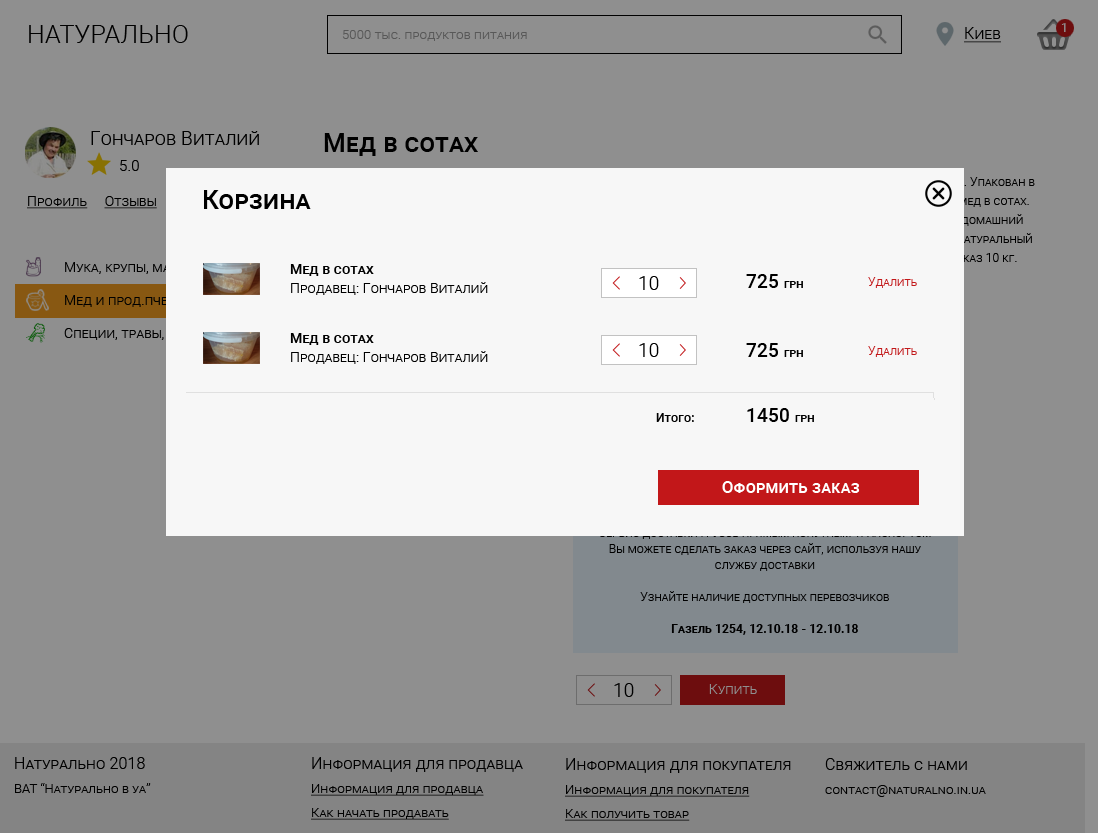
<style>
.page{position:relative;width:1098px;height:833px;background:#8f8f8f}
.page>*{position:absolute;margin:0}
.t1{font:25px "Roboto-Light";letter-spacing:0.01em;color:#000000;font-variant:small-caps}
.t2{font:13px "Roboto-Light";letter-spacing:0.01em;color:#585858;font-variant:small-caps}
.t3{font:16px "Roboto-Light";letter-spacing:0.01em;color:#000000;font-variant:small-caps;text-decoration:underline}
.t4{font:12px "Roboto-Medium";letter-spacing:0.01em;font-variant:small-caps}
.t5{font:19px "Roboto-Light";letter-spacing:0.01em;color:#000000;font-variant:small-caps}
.t6{font:26px "Roboto-Medium";letter-spacing:0.01em;color:#000000;font-variant:small-caps}
.t7{font:15px "Roboto-Light";letter-spacing:0.01em;color:#000000;font-variant:small-caps}
.t8{font:14px "Roboto-Light";letter-spacing:0.01em;color:#000000;font-variant:small-caps;text-decoration:underline}
.t9{font:14px/19px "Roboto-Light";letter-spacing:0.01em;color:#000000;font-variant:small-caps}
.t10{font:14px/19px "Roboto-Medium";letter-spacing:0.01em;color:#000000;font-variant:small-caps}
.t11{font:19px "Roboto-Medium";letter-spacing:0.01em;color:#000000;font-variant:small-caps}
.t12{font:12px "Roboto-Medium";letter-spacing:0.01em;color:#000000;font-variant:small-caps}
.t13{font:12px "Roboto-Light";letter-spacing:0.01em;color:#c21719;font-variant:small-caps}
.t14{font:17px "Roboto-Medium";letter-spacing:0.01em;color:#ffffff;font-variant:small-caps}
.t15{font:12px/16px "Roboto-Light";letter-spacing:0.01em;color:#000000;font-variant:small-caps}
.t16{font:12px/16px "Roboto-Bold";letter-spacing:0.01em;color:#000000;font-variant:small-caps}
.t17{font:14px "Roboto-Light";letter-spacing:0.01em;color:#8f8f8f;font-variant:small-caps}
.t18{font:13px/24px "Roboto-Light";letter-spacing:0.01em;color:#000000;font-variant:small-caps}
.t19{font:16px/26px "Roboto-Light";letter-spacing:0.01em;color:#000000;font-variant:small-caps}
.t20{font:13px/24px "Roboto-Light";letter-spacing:0.01em;color:#000000;font-variant:small-caps;text-decoration:underline}
</style>
<div class="page">
<p class="t1" style="left:29px;top:25px;width:159px;height:18px">НАТУРАЛЬНО</p>
<p class="t2" style="left:342px;top:30px;width:185px;height:11px">5000 тыс. продуктов питания</p>
<p class="t3" style="left:964px;top:27px;width:37px;height:16px">Киев</p>
<p class="t4" style="left:1061px;top:23px;width:5px;height:9px">1</p>
<p class="t5" style="left:91px;top:131px;width:168px;height:14px">Гончаров Виталий</p>
<p class="t6" style="left:324px;top:133px;width:154px;height:23px">Мед в сотах</p>
<p class="t7" style="left:120px;top:160px;width:19px;height:11px">5.0</p>
<p class="t8" style="left:27px;top:196px;width:130px;height:13px">Профиль     Отзывы</p>
<p class="t6" style="left:204px;top:190px;width:107px;height:19px">Корзина</p>
<p class="t9" style="left:290px;top:264px;width:198px;height:31px"><span class="t10">Мед в сотах<br></span>Продавец: Гончаров Виталий</p>
<p class="t5" style="left:639px;top:276px;width:20px;height:14px">10</p>
<p class="t11" style="left:746px;top:274px;width:57px;height:14px">725 <span class="t12">грн</span></p>
<p class="t13" style="left:868px;top:277px;width:49px;height:11px">Удалить</p>
<p class="t9" style="left:290px;top:333px;width:198px;height:31px"><span class="t10">Мед в сотах<br></span>Продавец: Гончаров Виталий</p>
<p class="t5" style="left:639px;top:343px;width:20px;height:14px">10</p>
<p class="t11" style="left:746px;top:343px;width:57px;height:14px">725 <span class="t12">грн</span></p>
<p class="t13" style="left:868px;top:346px;width:49px;height:11px">Удалить</p>
<p class="t12" style="left:656px;top:413px;width:38px;height:9px">Итого:</p>
<p class="t11" style="left:747px;top:408px;width:67px;height:14px">1450 <span class="t12">грн</span></p>
<p class="t14" style="left:722px;top:481px;width:138px;height:12px">Оформить заказ</p>
<p class="t15" style="left:599px;top:528px;width:332px;height:107px;text-align:center">Сервис доставки грузов прямым попутным транспортом<br>Вы можете сделать заказ через сайт, используя нашу службу доставки<br><br>Узнайте наличие доступных перевозчиков<br><br><span class="t16">Газель 1254, 12.10.18 - 12.10.18</span></p>
<p class="t5" style="left:614px;top:683px;width:20px;height:14px">10</p>
<p class="t17" style="left:709px;top:684px;width:48px;height:10px">Купить</p>
<p class="t18" style="left:15px;top:757px;width:136px;height:36px"><span class="t19">Натурально 2018<br></span>ВАТ “Натурально в уа”</p>
<p class="t20" style="left:311px;top:757px;width:212px;height:63px"><span class="t19">Информация для продавца<br></span>Информация для продавца<br>Как начать продавать</p>
<p class="t20" style="left:565px;top:758px;width:226px;height:63px"><span class="t19">Информация для покупателя<br></span>Информация для покупателя<br>Как получить товар</p>
<p class="t18" style="left:825px;top:758px;width:161px;height:39px"><span class="t19">Свяжитель с нами<br></span>contact@naturalno.in.ua</p>
</div>
